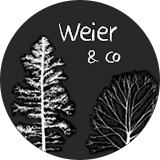
<style>
.page{position:relative;width:160px;height:160px;background:#282828}
.page>*{position:absolute;margin:0}
.t1{font:30px "DKCrayonCrumble";color:#ffffff}
.t2{font:20px "DKCrayonCrumble";color:#ffffff}
</style>
<div class="page">
<p class="t1" style="left:58px;top:22px;width:60px;height:20px">Weier</p>
<p class="t2" style="left:87px;top:50px;width:34px;height:14px">&amp; Co</p>
</div>
